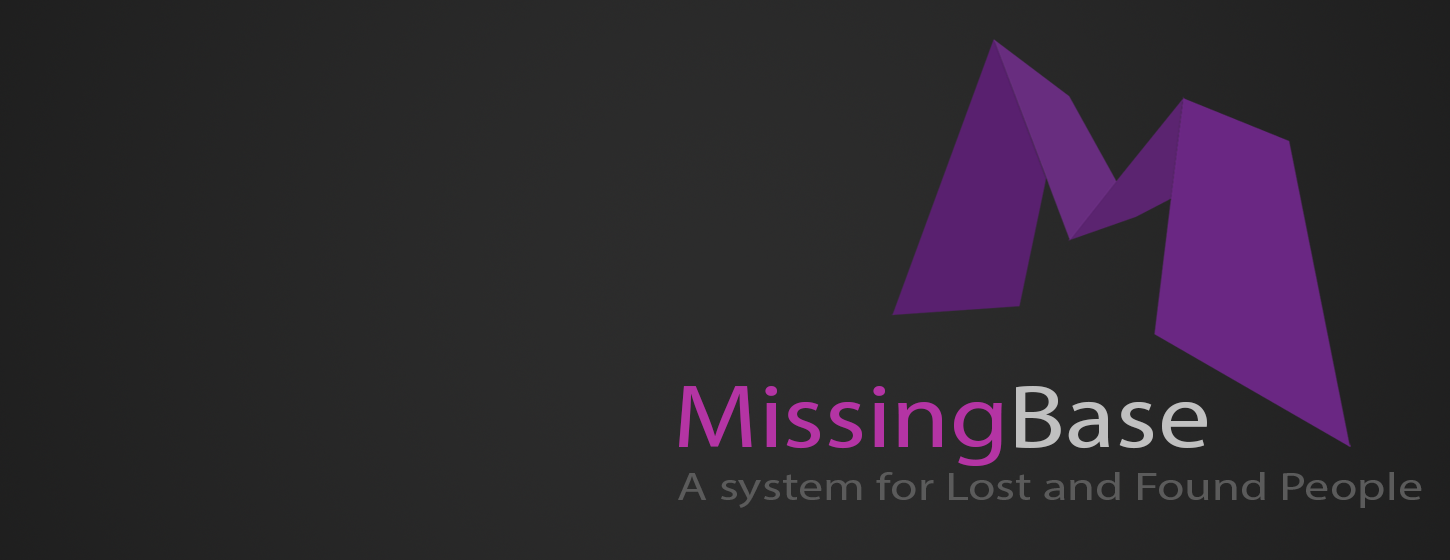
<style>
.page{position:relative;width:1450px;height:560px}
.page>*{position:absolute;margin:0}
.t1{font:90.4px "MyriadPro-Regular";color:#b434a4;scale:1.16 1}
.t2{font:90.4px "MyriadPro-Regular";color:#c0c0c0;scale:1.16 1}
.t3{font:39.4px "MyriadPro-Regular";color:#5b5b5b;scale:1.27 1}
</style>
<div class="page">
<p class="t1" style="left:679px;top:386px;width:528px;height:80px">Missing<span class="t2">Base</span></p>
<p class="t3" style="left:678px;top:472px;width:744px;height:36px">A system for Lost and Found People</p>
</div>
